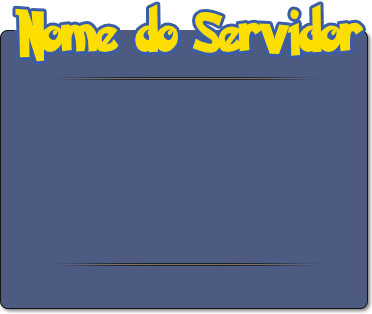
<style>
.page{position:relative;width:372px;height:314px;background:#4d5a81}
.page>*{position:absolute;margin:0}
.t1{font:44.8px "PokemonSolidNormal";color:#fcde00;scale:0.9 1}
</style>
<div class="page">
<p class="t1" style="left:15px;top:4px;width:349px;height:58px">Nome do Servidor</p>
</div>
